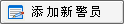
<style>
.page{position:relative;width:124px;height:24px;background:#f4f4f4}
.page>*{position:absolute;margin:0}
.t1{font:12px "SimSun";letter-spacing:0.2em;color:#000000}
</style>
<div class="page">
<p class="t1" style="left:32px;top:6px;width:68px;height:11px">添加新警员</p>
</div>
